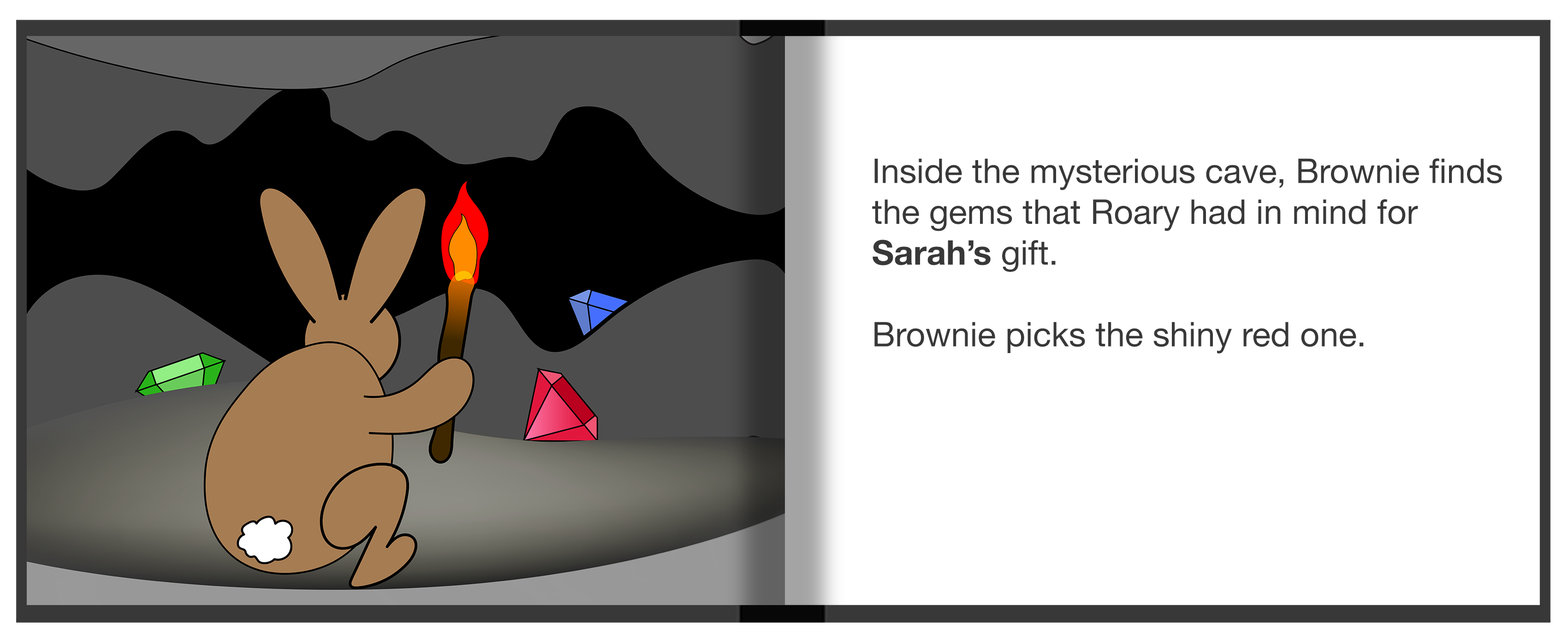
<style>
.page{position:relative;width:1568px;height:636px;background:#ffffff}
.page>*{position:absolute;margin:0}
.t1{font:34px "HelveticaNeue";color:#393838}
.t2{font:34px "HelveticaNeue-Bold";color:#393838}
</style>
<div class="page">
<p class="t1" style="left:872px;top:158px;width:630px;height:195px">Inside the mysterious cave, Brownie finds <br>the gems that Roary had in mind for <br><span class="t2">Sarah’s </span>gift. <br><br>Brownie picks the shiny red one.</p>
</div>
